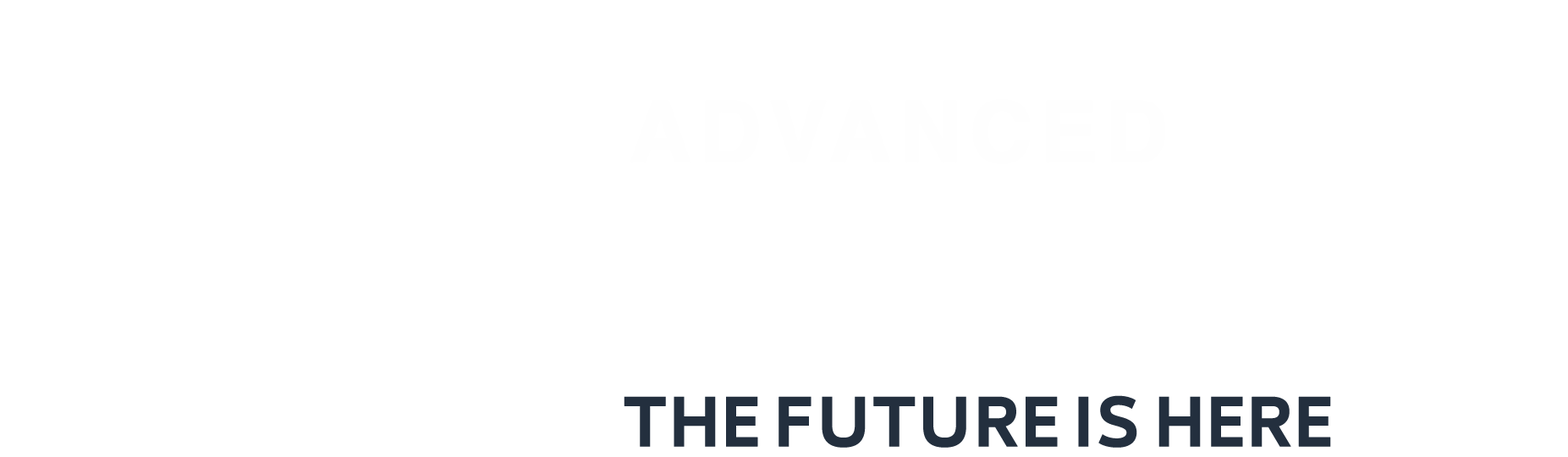
<style>
.page{position:relative;width:1568px;height:457px;background:#ffffff}
.page>*{position:absolute;margin:0}
.t1{font:61.1px "29LTBukra-SmBd";color:#232f3e;font-weight:bold}
</style>
<div class="page">
<p class="t1" style="left:624px;top:395px;width:707px;height:53px">THE FUTURE IS HERE</p>
</div>
